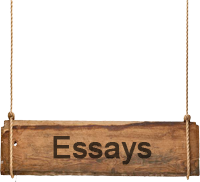
<style>
.page{position:relative;width:200px;height:182px;background:#ffffff}
.page>*{position:absolute;margin:0}
.t1{font:30px "ArialMT";color:#3d2c1e;font-weight:bold}
</style>
<div class="page">
<p class="t1" style="left:53px;top:136px;width:99px;height:29px">Essays</p>
</div>
